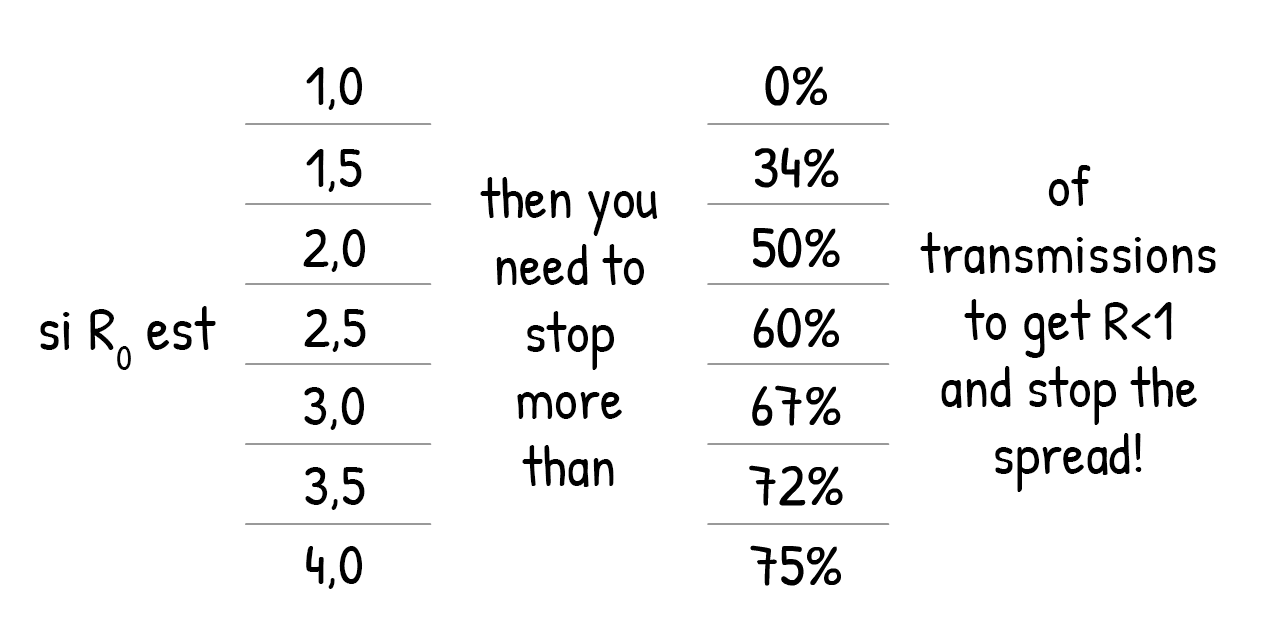
<style>
.page{position:relative;width:1280px;height:640px;background:#ffffff}
.page>*{position:absolute;margin:0}
.t1{font:100px "PatrickHand-Regular";color:#000000}
.t2{font:100px/67px "PatrickHand-Regular";color:#000000}
.t3{font:61px "PatrickHand-Regular";color:#000000}
</style>
<div class="page">
<p class="t1" style="left:306px;top:67px;width:57px;height:43px">1,0</p>
<p class="t1" style="left:306px;top:149px;width:56px;height:43px">1,5</p>
<p class="t2" style="left:920px;top:165px;width:296px;height:327px;text-align:center">of<br>transmissions<br>to get R&lt;1<br>and stop the<br>spread!</p>
<p class="t2" style="left:480px;top:177px;width:178px;height:310px;text-align:center">then you<br>need to<br>stop<br>more<br>than</p>
<p class="t1" style="left:303px;top:229px;width:63px;height:43px">2,0</p>
<p class="t3" style="left:40px;top:306px;width:176px;height:64px">si R0 est</p>
<p class="t1" style="left:304px;top:309px;width:62px;height:43px">2,5</p>
<p class="t1" style="left:304px;top:387px;width:61px;height:43px">3,0</p>
<p class="t1" style="left:305px;top:467px;width:60px;height:43px">3,5</p>
<p class="t1" style="left:306px;top:546px;width:57px;height:43px">4,0</p>
</div>
